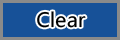
<style>
.page{position:relative;width:120px;height:40px;background:#175198}
.page>*{position:absolute;margin:0}
.t1{font:19.6px "MicrosoftYaHei";color:#000000}
</style>
<div class="page">
<p class="t1" style="left:37px;top:11px;width:49px;height:17px">Clear</p>
</div>
